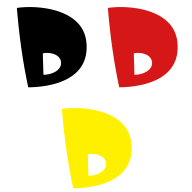
<style>
.page{position:relative;width:192px;height:192px;background:#ffffff}
.page>*{position:absolute;margin:0}
.t1{font:113.8px/101px "WellwaitFree-Regular";color:#000000;scale:1.06 1}
.t2{font:113.8px/101px "WellwaitFree-Regular";color:#d51717;scale:1.06 1}
.t3{font:113.8px/101px "WellwaitFree-Regular";color:#fff000;scale:1.06 1}
</style>
<div class="page">
<p class="t1" style="left:16px;top:7px;width:162px;height:182px;text-align:center">D <span class="t2">D<br></span><span class="t3">D</span></p>
</div>
